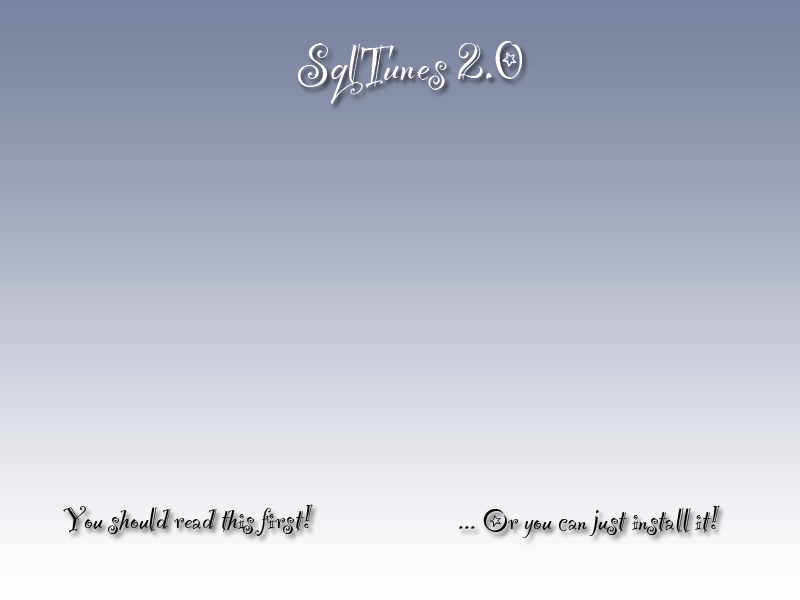
<style>
.page{position:relative;width:800px;height:600px}
.page>*{position:absolute;margin:0}
.t1{font:60px "PartyLetPlain";color:#ffffff}
.t2{font:36px "PartyLetPlain";color:#000000}
</style>
<div class="page">
<p class="t1" style="left:298px;top:41px;width:225px;height:63px">SqlTunes 2.0</p>
<p class="t2" style="left:63px;top:504px;width:250px;height:32px">You should read this first!</p>
<p class="t2" style="left:459px;top:505px;width:261px;height:33px">... Or you can just install it!</p>
</div>
